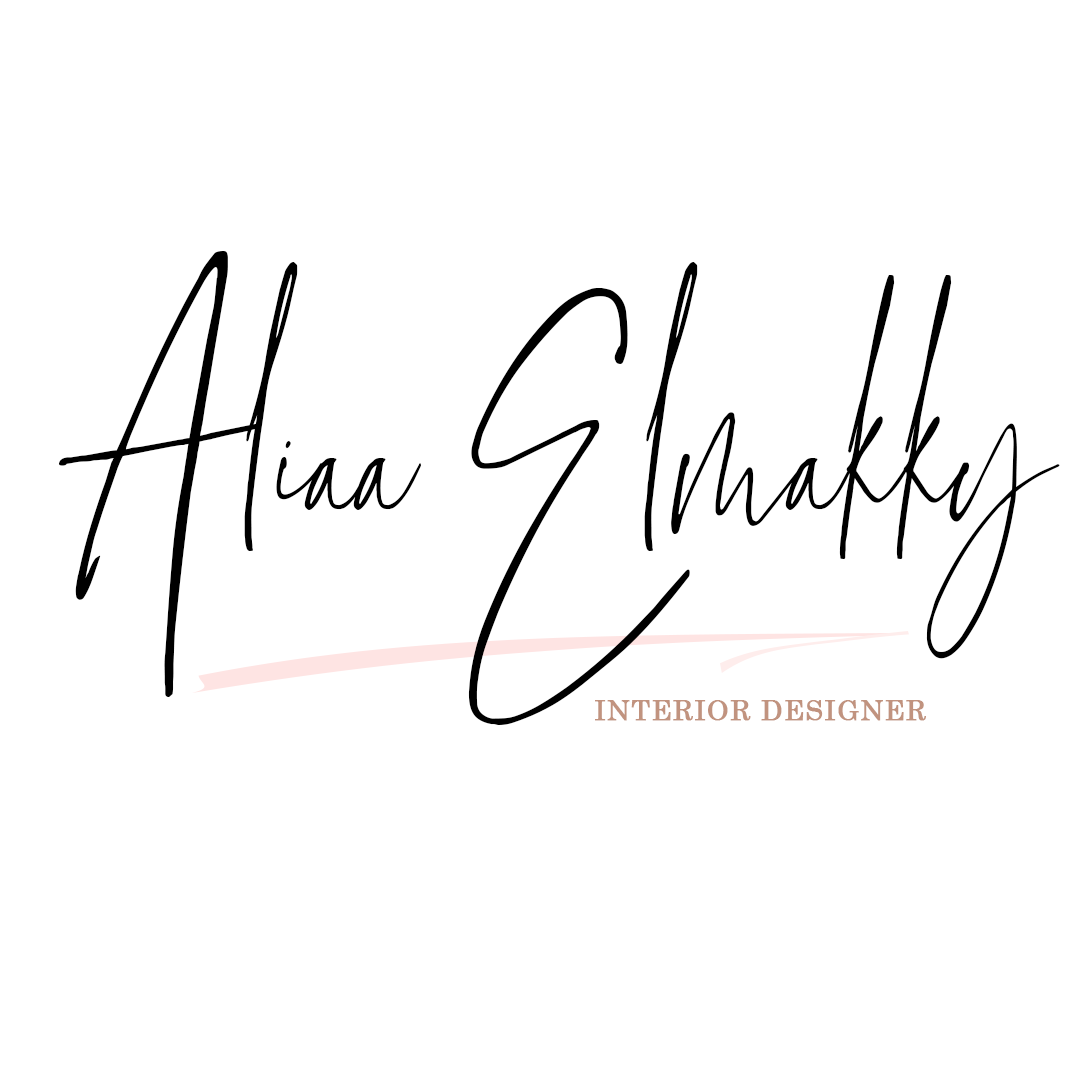
<style>
.page{position:relative;width:1080px;height:1080px;background:#ffffff}
.page>*{position:absolute;margin:0}
.t1{font:584px "Grandiose";color:#000000;scale:0.82 1}
.t2{font:28px "CenturySchoolbook";letter-spacing:0.02em;color:#c1937f;text-transform:uppercase;font-weight:bold}
</style>
<div class="page">
<p class="t1" style="left:59px;top:251px;width:1001px;height:474px">Aliaa Elmakky</p>
<p class="t2" style="left:595px;top:700px;width:331px;height:21px">interior Designer</p>
</div>
